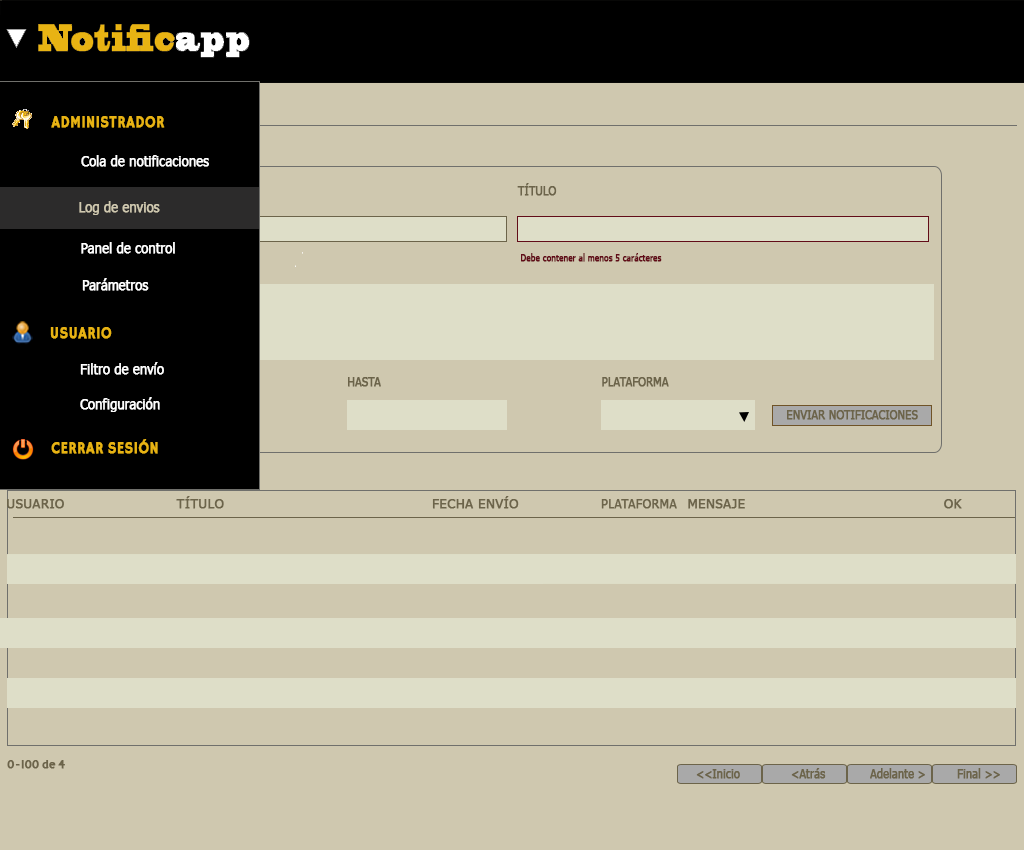
<style>
.page{position:relative;width:1024px;height:850px;background:#cfc8af}
.page>*{position:absolute;margin:0}
.t1{font:16px "HammersmithOne";color:#e8b313;font-weight:bold;scale:0.9 1}
.t2{font:14px "Tahoma";color:#ffffff;font-weight:bold;scale:0.9 1}
.t3{font:12px "Tahoma";color:#6c644a;font-weight:bold;scale:0.9 1}
.t4{font:14px "Tahoma";color:#cfc8af;font-weight:bold;scale:0.9 1}
.t5{font:9px "Tahoma";color:#620c18;font-weight:bold;scale:0.9 1}
.t6{font:12px "Tahoma";color:#6c644a;font-weight:bold;scale:1.12 1}
.t7{font:12px "Tahoma";color:#6c644a;font-weight:bold}
.t8{font:12px "HammersmithOne";color:#6c644a;font-weight:bold;scale:0.9 1}
</style>
<div class="page">
<p class="t1" style="left:51px;top:116px;width:114px;height:12px">ADMINISTRADOR</p>
<p class="t2" style="left:81px;top:155px;width:128px;height:12px">Cola de notificaciones</p>
<p class="t3" style="left:517px;top:183px;width:40px;height:13px">TÍTULO</p>
<p class="t4" style="left:79px;top:201px;width:81px;height:14px">Log de envios</p>
<p class="t2" style="left:81px;top:242px;width:94px;height:12px">Panel de control</p>
<p class="t5" style="left:521px;top:253px;width:141px;height:9px">Debe contener al menos 5 carácteres</p>
<p class="t2" style="left:82px;top:278px;width:67px;height:13px">Parámetros</p>
<p class="t1" style="left:50px;top:327px;width:62px;height:12px">USUARIO</p>
<p class="t2" style="left:80px;top:362px;width:84px;height:13px">Filtro de envío</p>
<p class="t3" style="left:348px;top:377px;width:33px;height:10px">HASTA</p>
<p class="t3" style="left:602px;top:377px;width:67px;height:10px">PLATAFORMA</p>
<p class="t2" style="left:80px;top:397px;width:80px;height:15px">Configuración</p>
<p class="t3" style="left:787px;top:410px;width:131px;height:10px">ENVIAR NOTIFICACIONES</p>
<p class="t1" style="left:51px;top:439px;width:107px;height:15px">CERRAR SESIÓN</p>
<p class="t6" style="left:176px;top:496px;width:48px;height:13px">TÍTULO</p>
<p class="t6" style="left:432px;top:496px;width:87px;height:13px">FECHA ENVÍO</p>
<p class="t6" style="left:7px;top:499px;width:57px;height:10px">USUARIO</p>
<p class="t7" style="left:601px;top:499px;width:76px;height:10px">PLATAFORMA</p>
<p class="t6" style="left:688px;top:499px;width:57px;height:10px">MENSAJE</p>
<p class="t6" style="left:944px;top:499px;width:18px;height:10px">OK</p>
<p class="t8" style="left:7px;top:760px;width:58px;height:9px">0-100 de 4</p>
<p class="t3" style="left:696px;top:769px;width:44px;height:10px">&lt;&lt;Inicio</p>
<p class="t3" style="left:791px;top:768px;width:35px;height:11px">&lt;Atrás</p>
<p class="t3" style="left:870px;top:768px;width:55px;height:11px">Adelante &gt;</p>
<p class="t3" style="left:957px;top:768px;width:43px;height:11px">Final &gt;&gt;</p>
</div>
